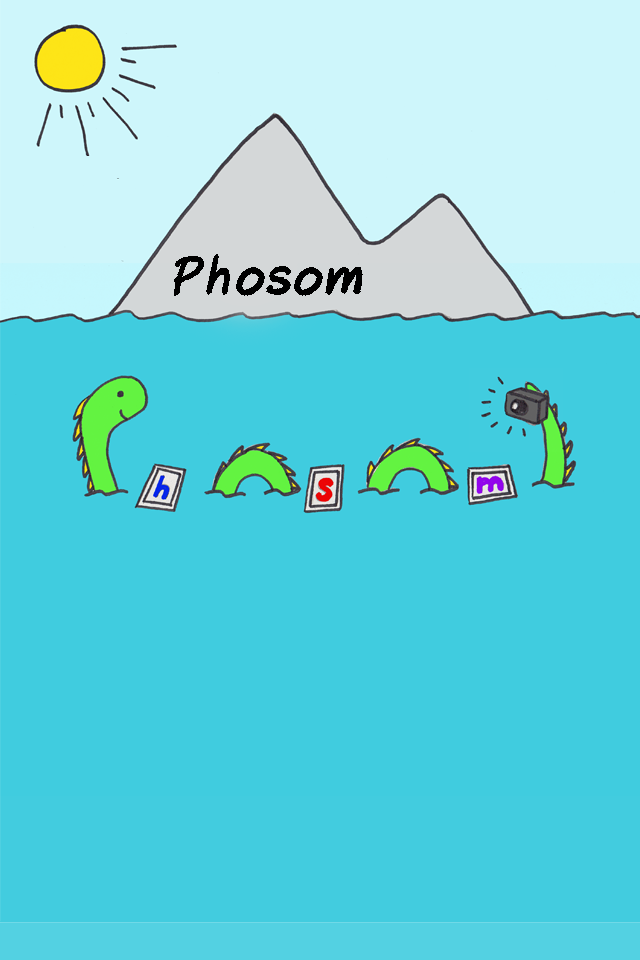
<style>
.page{position:relative;width:640px;height:960px;background:#40ccdf}
.page>*{position:absolute;margin:0}
.t1{font:50px "AxureHandwriting-BoldItalic";color:#000000}
</style>
<div class="page">
<p class="t1" style="left:174px;top:254px;width:189px;height:42px">Phosom</p>
</div>
